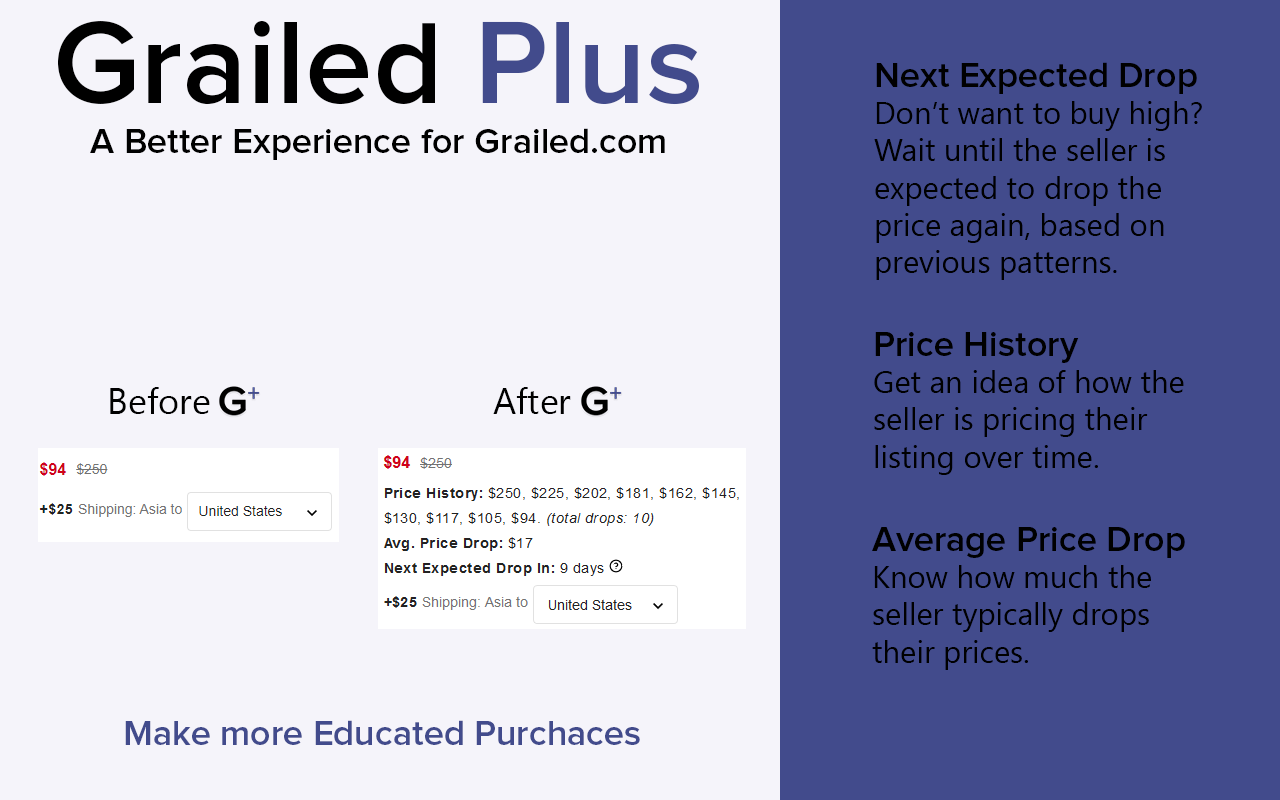
<style>
.page{position:relative;width:1280px;height:800px;background:#f5f4fa}
.page>*{position:absolute;margin:0}
.t1{font:121px "ProximaNova-Semibold";color:#000000}
.t2{font:121px "ProximaNova-Semibold";color:#424b8c}
.t3{font:31px "SegoeUI";color:#000000}
.t4{font:36px "ProximaNova-Semibold";color:#000000}
.t5{font:36px "SegoeUI";color:#000000}
.t6{font:36px "ProximaNova-Semibold";color:#424b8c}
</style>
<div class="page">
<p class="t1" style="left:58px;top:21px;width:641px;height:84px">Grailed <span class="t2">Plus</span></p>
<p class="t3" style="left:874px;top:62px;width:328px;height:218px"><span class="t4">Next Expected Drop<br></span>Don’t want to buy high?<br>Wait until the seller is<br>expected to drop the <br>price again, based on<br>previous patterns.</p>
<p class="t4" style="left:90px;top:128px;width:575px;height:32px">A Better Experience for Grailed.com</p>
<p class="t3" style="left:874px;top:332px;width:310px;height:143px"><span class="t4">Price History<br></span>Get an idea of how the<br>seller is pricing their<br>listing over time.</p>
<p class="t5" style="left:110px;top:387px;width:100px;height:27px">Before</p>
<p class="t5" style="left:493px;top:387px;width:78px;height:27px">After</p>
<p class="t3" style="left:872px;top:527px;width:313px;height:143px"><span class="t4">Average Price Drop<br></span>Know how much the<br>seller typically drops<br>their prices.</p>
<p class="t6" style="left:125px;top:720px;width:515px;height:25px">Make more Educated Purchaces</p>
</div>
